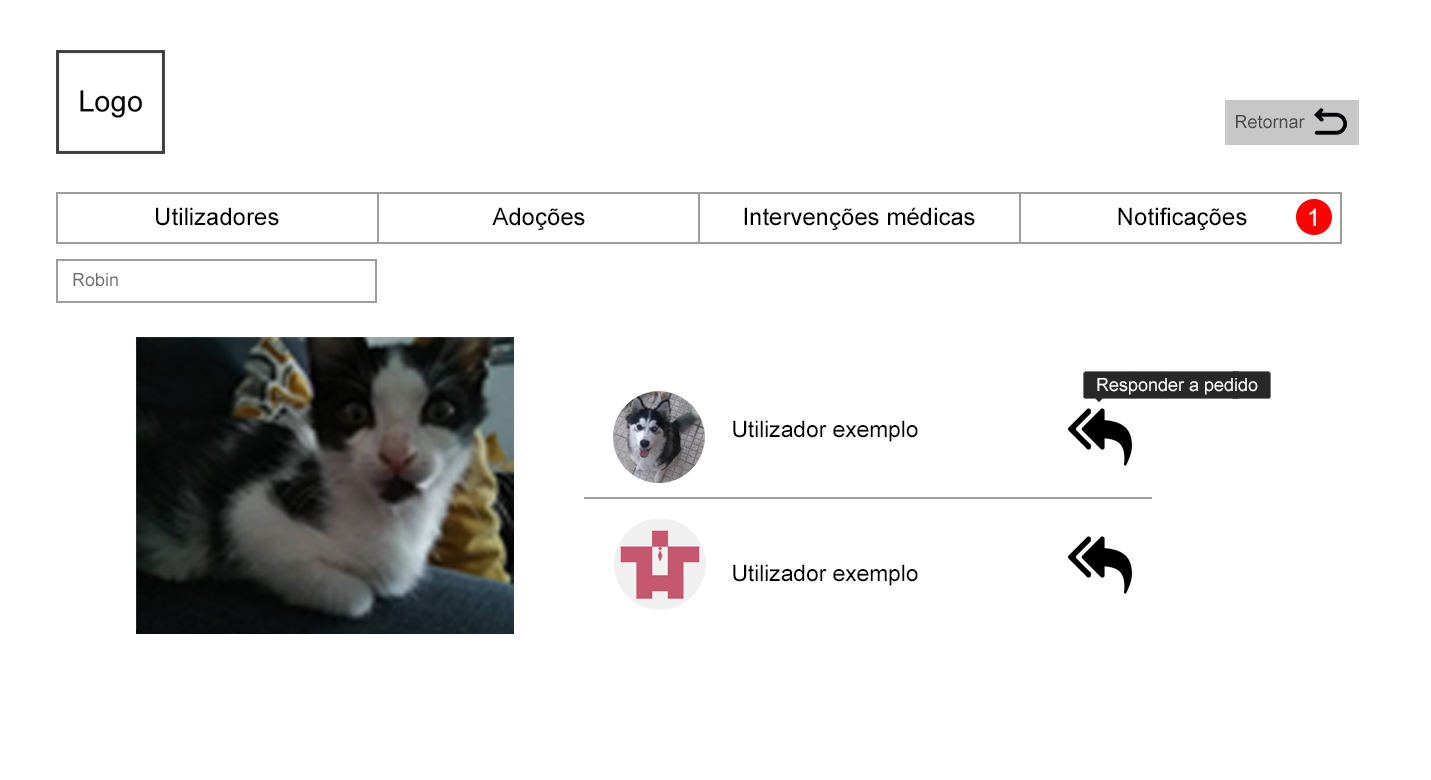
<style>
.page{position:relative;width:1431px;height:780px;background:#ffffff}
.page>*{position:absolute;margin:0}
.t1{font:18px "ArialMT";color:#484848}
.t2{font:24px "ArialMT";color:#000000}
.t3{font:24px "ArialMT";color:#ffffff}
.t4{font:18px "ArialMT";color:#6e6e6e}
.t5{font:18px "ArialMT";color:#ffffff}
.t6{font:22.7px "ArialMT";color:#000000}
</style>
<div class="page">
<p class="t1" style="left:1236px;top:115px;width:69px;height:14px">Retornar</p>
<p class="t2" style="left:156px;top:207px;width:123px;height:19px">Utilizadores</p>
<p class="t2" style="left:492px;top:207px;width:93px;height:23px">Adoções</p>
<p class="t2" style="left:744px;top:207px;width:231px;height:23px">Intervenções médicas</p>
<p class="t2" style="left:1118px;top:207px;width:129px;height:23px">Notificações</p>
<p class="t3" style="left:1309px;top:208px;width:7px;height:18px">1</p>
<p class="t4" style="left:73px;top:273px;width:45px;height:14px">Robin</p>
<p class="t5" style="left:1097px;top:378px;width:161px;height:17px">Responder a pedido</p>
<p class="t6" style="left:733px;top:420px;width:185px;height:22px">Utilizador exemplo</p>
<p class="t6" style="left:733px;top:564px;width:185px;height:22px">Utilizador exemplo</p>
</div>
